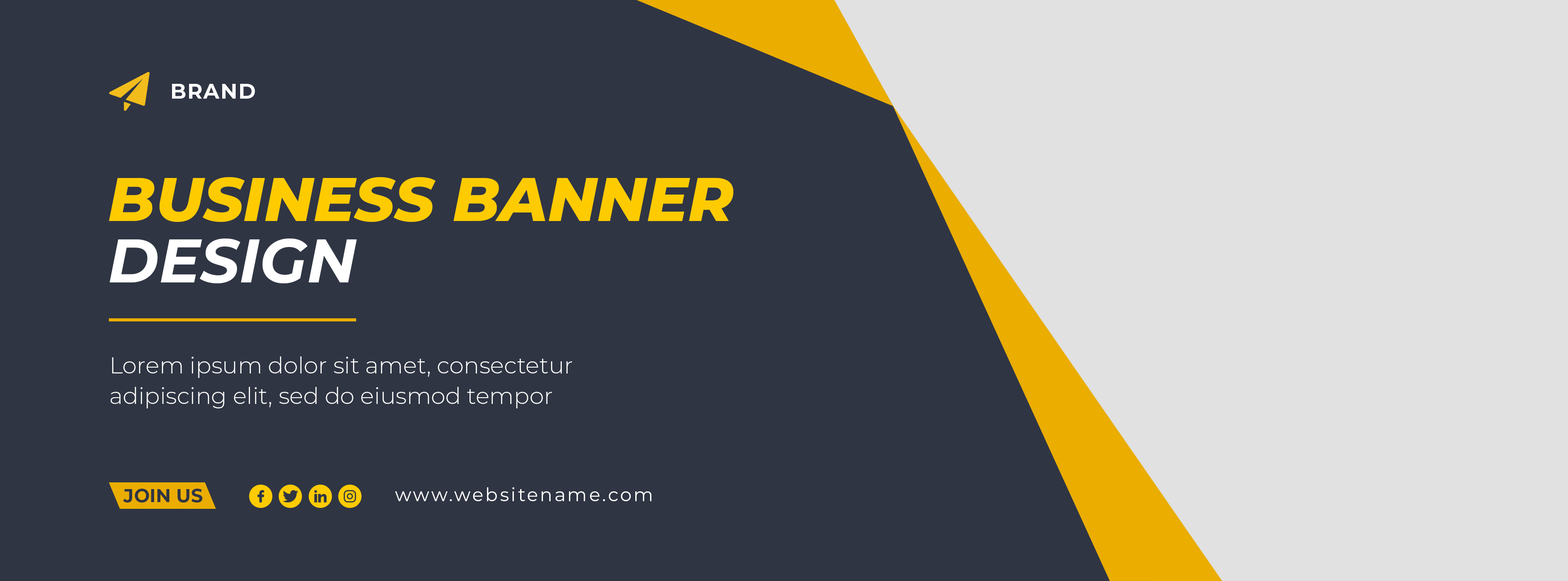
<style>
.page{position:relative;width:1568px;height:581px;background:#2f3543}
.page>*{position:absolute;margin:0}
.t1{font:61.4px/61.4px "Montserrat-ExtraBoldItalic";color:#fecb00;text-transform:uppercase}
.t2{font:61.4px/61.4px "Montserrat-BoldItalic";color:#ffffff;text-transform:uppercase}
.t3{font:23px/30.7px "Montserrat-Light";color:#ffffff}
.t4{font:18.7px "Montserrat-Bold";color:#2f3543;text-transform:uppercase}
.t5{font:18.7px "Montserrat-Regular";letter-spacing:0.1em;color:#fdfdfd}
</style>
<div class="page">
<p class="t1" style="left:109px;top:177px;width:624px;height:107px">business banner<br><span class="t2">design</span></p>
<p class="t3" style="left:111px;top:356px;width:461px;height:52px">Lorem ipsum dolor sit amet, consectetur adipiscing elit, sed do eiusmod tempor</p>
<p class="t4" style="left:123px;top:488px;width:79px;height:14px">join us</p>
<p class="t5" style="left:395px;top:487px;width:256px;height:14px">www.websitename.com</p>
</div>
